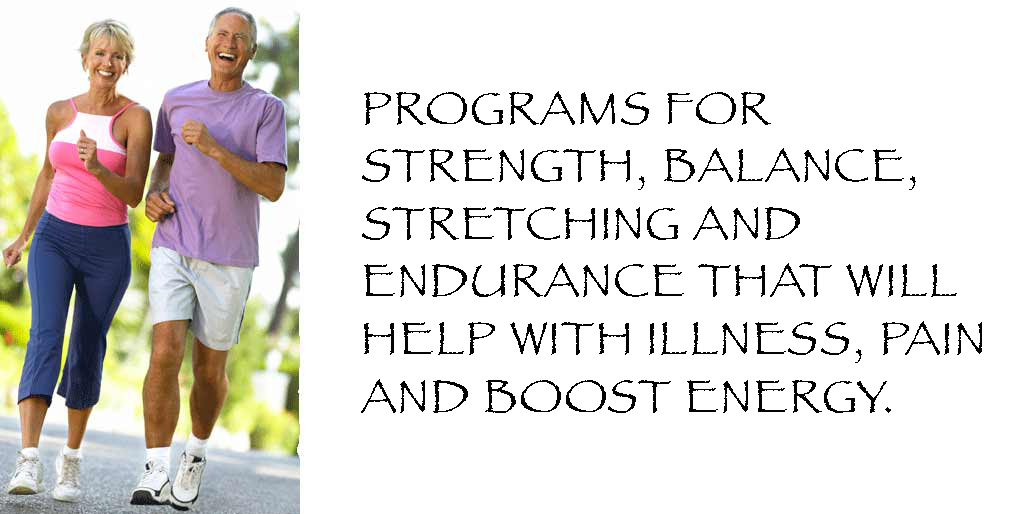
<style>
.page{position:relative;width:1026px;height:514px;background:#ffffff}
.page>*{position:absolute;margin:0}
.t1{font:48px "Papyrus";letter-spacing:0.025em;color:#030303}
</style>
<div class="page">
<p class="t1" style="left:361px;top:91px;width:621px;height:322px">PROGRAMS FOR STRENGTH, BALANCE, STRETCHING AND ENDURANCE THAT WILL HELP WITH ILLNESS, PAIN AND BOOST ENERGY.</p>
</div>
